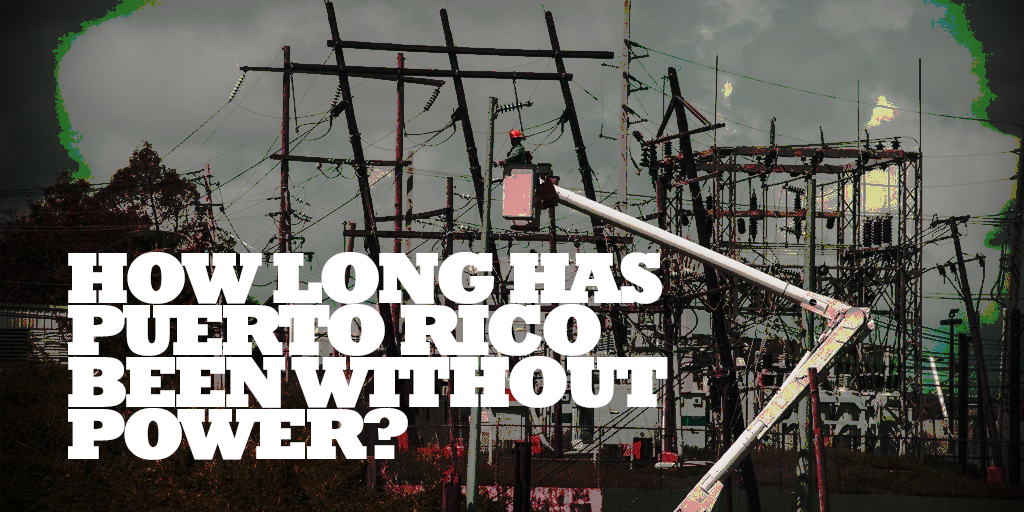
<style>
.page{position:relative;width:1024px;height:512px}
.page>*{position:absolute;margin:0}
.t1{font:72px/52px "Rockwell-ExtraBold";letter-spacing:-0.075em;color:#ffffff;font-weight:bold}
</style>
<div class="page">
<p class="t1" style="left:68px;top:252px;width:600px;height:208px">HOW LONG HAS PUERTO RICO BEEN WITHOUT POWER?</p>
</div>
